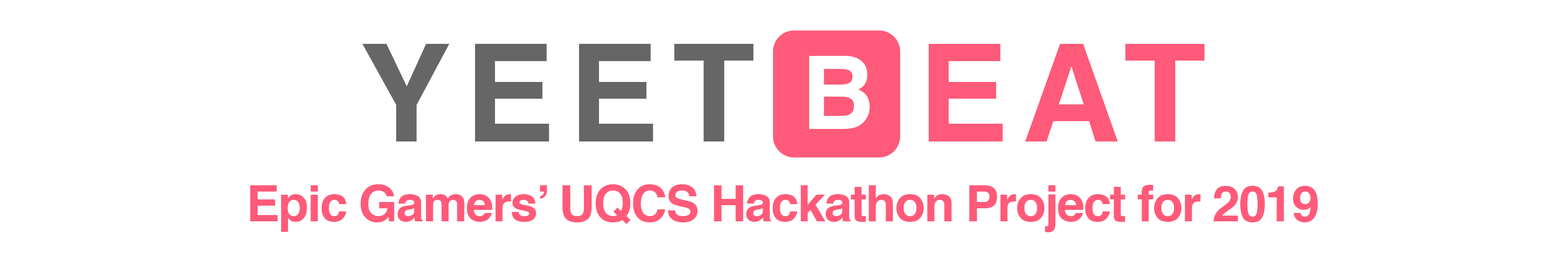
<style>
.page{position:relative;width:1568px;height:261px;background:#ffffff}
.page>*{position:absolute;margin:0}
.t1{font:135.6px "Helvetica-Bold";letter-spacing:0.1em;color:#666666}
.t2{font:135.6px "EmojiOneColor";letter-spacing:0.1em;color:#ff5a79}
.t3{font:135.6px "Helvetica-Bold";letter-spacing:0.1em;color:#ff5a79}
.t4{font:101.6px "Helvetica-Bold";letter-spacing:-0.03em;color:#ffffff}
.t5{font:50.2px "Helvetica-Bold";letter-spacing:-0.03em;color:#ff5a79}
</style>
<div class="page">
<p class="t1" style="left:362px;top:30px;width:843px;height:128px">YEET<span class="t2">🅱</span><span class="t3">EAT</span></p>
<p class="t4" style="left:809px;top:56px;width:61px;height:73px">B</p>
<p class="t5" style="left:250px;top:185px;width:1068px;height:48px">Epic Gamers’ UQCS Hackathon Project for 2019</p>
</div>
